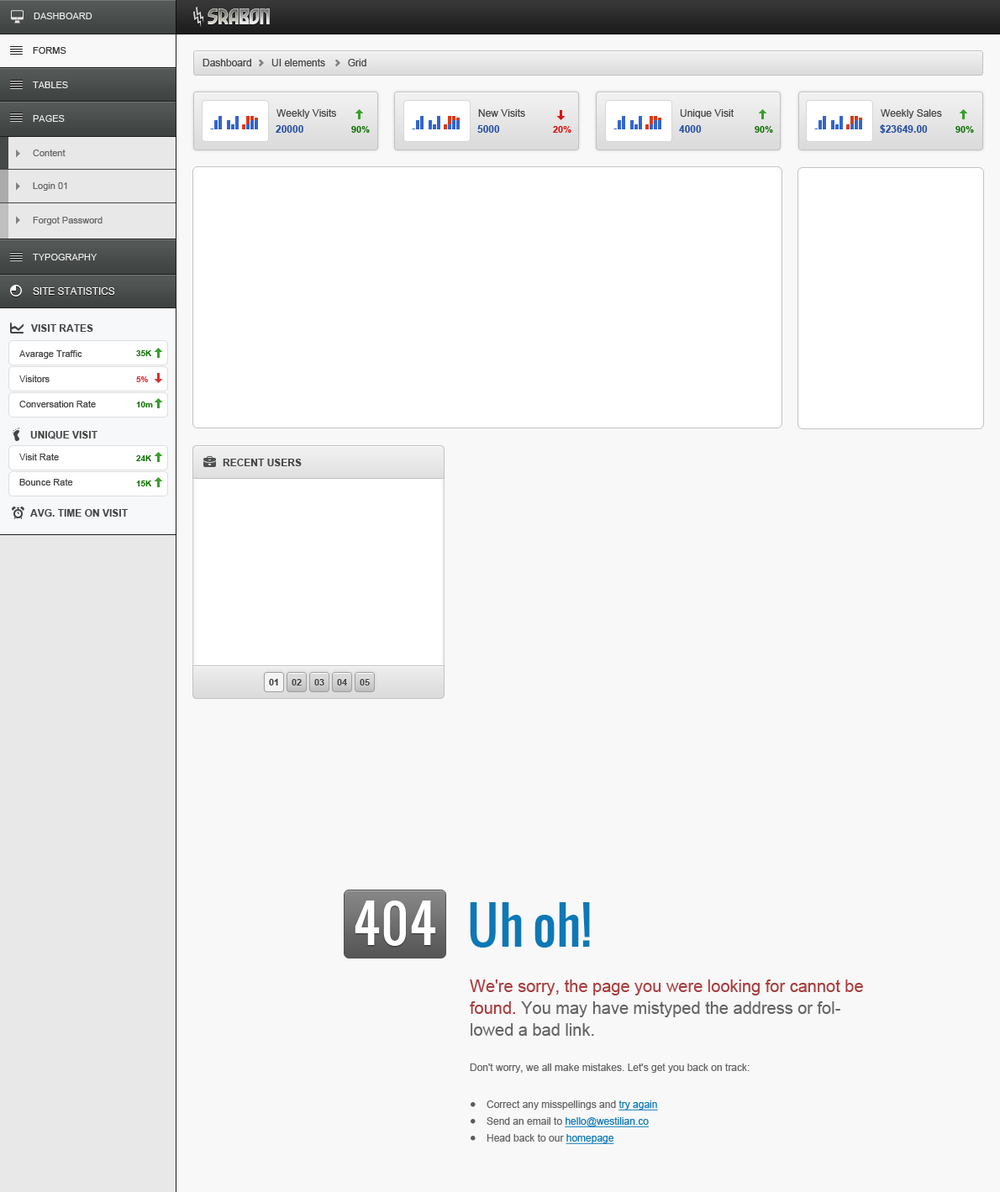
<style>
.page{position:relative;width:1000px;height:1192px;background:#f8f8f8}
.page>*{position:absolute;margin:0}
.t1{font:9.4px "ArialMT";color:#eeeeee;text-transform:uppercase}
.t2{font:25.2px "Garage-Garbage";text-transform:uppercase}
.t3{font:9.4px "ArialMT";color:#333333;text-transform:uppercase}
.t4{font:10.1px "ArialMT";color:#444444}
.t5{font:10.1px "Arial-BoldMT";color:#2750a2}
.t6{font:9.2px "Arial-BoldMT";color:#117104}
.t7{font:9.2px "Arial-BoldMT";color:#dc1212}
.t8{font:9.4px "ArialMT";color:#666666}
.t9{font:10.1px "ArialMT";color:#f8f8f8;text-transform:uppercase}
.t10{font:10.1px "Arial-BoldMT";color:#434745;text-transform:uppercase}
.t11{font:9.2px/25.2px "ArialMT";color:#444444}
.t12{font:8.4px "Arial-BoldMT";color:#117104}
.t13{font:8.4px "Arial-BoldMT";color:#d73131}
.t14{font:10.1px "Arial-BoldMT";color:#444444;text-transform:uppercase}
.t15{font:9.2px "Arial-BoldMT";color:#444444}
.t16{font:50.4px "Oswald";color:#ffffff}
.t17{font:50.4px "Oswald";color:#0d78b6}
.t18{font:16.8px/21.8px "ArialMT";color:#aa3d3d}
.t19{font:16.8px/21.8px "ArialMT";color:#646464}
.t20{font:10.1px "ArialMT";color:#646464}
.t21{font:10.1px/16.8px "ArialMT";color:#646464}
.t22{font:10.1px/16.8px "ArialMT";color:#0d78b6;text-decoration:underline}
</style>
<div class="page">
<p class="t1" style="left:34px;top:13px;width:58px;height:6px">Dashboard</p>
<p class="t2" style="left:208px;top:8px;width:62px;height:16px">Srabon</p>
<p class="t3" style="left:33px;top:47px;width:33px;height:7px">Forms</p>
<p class="t4" style="left:203px;top:59px;width:163px;height:7px">Dashboard       UI elements        Grid</p>
<p class="t1" style="left:33px;top:82px;width:35px;height:6px">Tables</p>
<p class="t4" style="left:276px;top:109px;width:60px;height:9px">Weekly Visits</p>
<p class="t4" style="left:478px;top:109px;width:47px;height:8px">New Visits</p>
<p class="t4" style="left:680px;top:109px;width:54px;height:9px">Unique Visit</p>
<p class="t4" style="left:881px;top:109px;width:61px;height:9px">Weekly Sales</p>
<p class="t1" style="left:33px;top:115px;width:32px;height:7px">Pages</p>
<p class="t5" style="left:276px;top:125px;width:27px;height:8px">20000</p>
<p class="t5" style="left:477px;top:125px;width:23px;height:8px">5000</p>
<p class="t5" style="left:679px;top:125px;width:23px;height:8px">4000</p>
<p class="t5" style="left:880px;top:124px;width:48px;height:10px">$23649.00</p>
<p class="t6" style="left:351px;top:126px;width:19px;height:7px">90%</p>
<p class="t7" style="left:553px;top:126px;width:18px;height:7px">20%</p>
<p class="t6" style="left:755px;top:126px;width:18px;height:7px">90%</p>
<p class="t6" style="left:955px;top:126px;width:19px;height:7px">90%</p>
<p class="t8" style="left:33px;top:150px;width:33px;height:6px">Content</p>
<p class="t8" style="left:33px;top:182px;width:34px;height:9px">Login 01</p>
<p class="t8" style="left:33px;top:217px;width:70px;height:8px">Forgot Password</p>
<p class="t1" style="left:33px;top:254px;width:64px;height:7px">Typography</p>
<p class="t9" style="left:33px;top:287px;width:82px;height:8px">Site Statistics</p>
<p class="t10" style="left:31px;top:324px;width:62px;height:8px">Visit Rates</p>
<p class="t11" style="left:19px;top:350px;width:77px;height:58px">Avarage Traffic<br>Visitors<br>Conversation Rate</p>
<p class="t12" style="left:136px;top:350px;width:15px;height:6px">35K</p>
<p class="t13" style="left:136px;top:376px;width:12px;height:6px">5%</p>
<p class="t12" style="left:136px;top:402px;width:17px;height:6px">10m</p>
<p class="t10" style="left:30px;top:431px;width:67px;height:8px">Unique Visit</p>
<p class="t11" style="left:19px;top:454px;width:54px;height:32px">Visit Rate<br>Bounce Rate</p>
<p class="t12" style="left:136px;top:455px;width:15px;height:6px">24K</p>
<p class="t14" style="left:223px;top:459px;width:79px;height:7px">Recent Users</p>
<p class="t12" style="left:136px;top:481px;width:15px;height:6px">15K</p>
<p class="t10" style="left:30px;top:509px;width:98px;height:8px">Avg. Time on Visit</p>
<p class="t15" style="left:269px;top:679px;width:9px;height:7px">01</p>
<p class="t15" style="left:292px;top:679px;width:10px;height:7px">02</p>
<p class="t15" style="left:314px;top:679px;width:10px;height:7px">03</p>
<p class="t15" style="left:337px;top:679px;width:10px;height:7px">04</p>
<p class="t15" style="left:360px;top:679px;width:10px;height:7px">05</p>
<p class="t16" style="left:355px;top:901px;width:81px;height:45px">404</p>
<p class="t17" style="left:470px;top:903px;width:120px;height:45px">Uh oh!</p>
<p class="t18" style="left:470px;top:980px;width:393px;height:56px">We're sorry, the page you were looking for cannot be found. <span class="t19">You may have mistyped the address or followed a bad link.</span></p>
<p class="t20" style="left:470px;top:1064px;width:280px;height:9px">Don't worry, we all make mistakes. Let's get you back on track:</p>
<p class="t21" style="left:487px;top:1101px;width:171px;height:44px">Correct any misspellings and <span class="t22">try again<br></span>Send an email to <span class="t22">hello@westilian.co<br></span>Head back to our <span class="t22">homepage</span></p>
</div>
